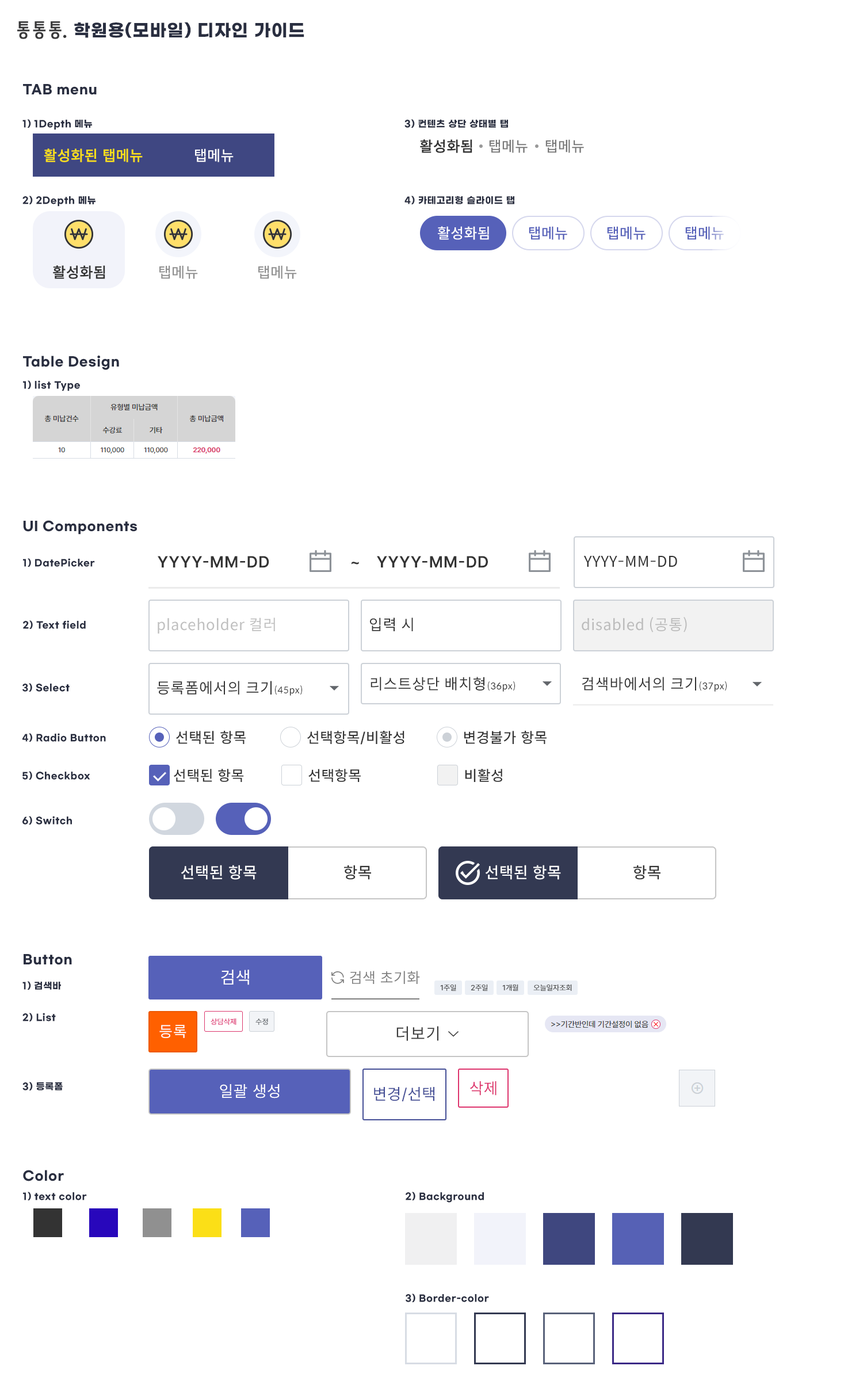
<style>
.page{position:relative;width:863px;height:1381px;background:#ffffff}
.page>*{position:absolute;margin:0}
.t1{font:17.3px "GmarketSansTTFBold";letter-spacing:0.04em;color:#292e40}
.t2{font:12.7px "GmarketSansTTFBold";letter-spacing:0.04em;color:#292e40}
.t3{font:9.2px "GmarketSansTTFBold";letter-spacing:0.04em;color:#292e40}
.t4{font:15px "Pretendard-Medium";letter-spacing:0.04em;color:#fbdf17;font-weight:bold}
.t5{font:15px "Pretendard-Medium";letter-spacing:0.04em;color:#ffffff}
.t6{font:15px "Pretendard-Medium";letter-spacing:0.04em;color:#333333;font-weight:bold}
.t7{font:15px "Pretendard-Medium";letter-spacing:0.04em;color:#7a7a7a}
.t8{font:15px "Pretendard-Medium";letter-spacing:0.04em;color:#5661b9}
.t9{font:15px "Pretendard-Medium";letter-spacing:0.04em;color:#909090}
.t10{font:16.1px "Pretendard-SemiBold";letter-spacing:0.04em;color:#333333}
.t11{font:15px "SpoqaHanSans-Regular";letter-spacing:0.04em;color:#333333}
.t12{font:15px "SpoqaHanSans-Regular";letter-spacing:0.04em;color:#c0c0c0}
.t13{font:15px "SpoqaHanSans-Regular";letter-spacing:0.04em;color:#bcbcbc}
.t14{font:9.2px "SpoqaHanSans-Regular";letter-spacing:0.04em;color:#333333}
.t15{font:15px "Pretendard-Medium";letter-spacing:0.04em;color:#333333}
.t16{font:14.8px "Pretendard-Medium";letter-spacing:0.04em;color:#333333}
.t17{font:16.1px "Pretendard-Medium";letter-spacing:0.04em;color:#ffffff}
.t18{font:16.1px "Pretendard-Medium";letter-spacing:0.04em;color:#333333}
.t19{font:17.3px "Pretendard-Regular";letter-spacing:0.04em;color:#ffffff}
.t20{font:15px "Pretendard-Regular";letter-spacing:0.04em;color:#7e7e7e}
.t21{font:15px "SpoqaHanSans-Regular";letter-spacing:0.04em;color:#ffffff}
.t22{font:16.1px "SpoqaHanSans-Regular";letter-spacing:0.04em;color:#3c3c3c}
.t23{font:16.1px "Pretendard-Regular";letter-spacing:0.04em;color:#ffffff}
.t24{font:16.1px "Pretendard-Regular";letter-spacing:0.04em;color:#dd346d}
.t25{font:16.1px "Pretendard-Regular";letter-spacing:0.04em;color:#454f96}
</style>
<div class="page">
<p class="t1" style="left:74px;top:22px;width:230px;height:16px">학원용(모바일) 디자인 가이드</p>
<p class="t2" style="left:23px;top:84px;width:74px;height:11px">TAB menu</p>
<p class="t3" style="left:22px;top:119px;width:70px;height:11px">1) 1Depth 메뉴</p>
<p class="t3" style="left:405px;top:119px;width:103px;height:9px">3) 컨텐츠 상단 상태별 탭</p>
<p class="t4" style="left:44px;top:148px;width:99px;height:14px">활성화된 탭메뉴</p>
<p class="t5" style="left:195px;top:148px;width:39px;height:14px">탭메뉴</p>
<p class="t6" style="left:420px;top:139px;width:53px;height:14px">활성화됨</p>
<p class="t7" style="left:489px;top:139px;width:39px;height:14px">탭메뉴</p>
<p class="t7" style="left:546px;top:139px;width:38px;height:14px">탭메뉴</p>
<p class="t3" style="left:22px;top:196px;width:74px;height:11px">2) 2Depth 메뉴</p>
<p class="t3" style="left:405px;top:196px;width:110px;height:8px">4) 카테고리형 슬라이드 탭</p>
<p class="t5" style="left:438px;top:226px;width:51px;height:14px">활성화됨</p>
<p class="t8" style="left:529px;top:226px;width:38px;height:14px">탭메뉴</p>
<p class="t8" style="left:607px;top:226px;width:39px;height:14px">탭메뉴</p>
<p class="t8" style="left:685px;top:226px;width:39px;height:14px">탭메뉴</p>
<p class="t6" style="left:53px;top:265px;width:52px;height:14px">활성화됨</p>
<p class="t9" style="left:159px;top:265px;width:39px;height:14px">탭메뉴</p>
<p class="t9" style="left:258px;top:265px;width:39px;height:14px">탭메뉴</p>
<p class="t2" style="left:23px;top:355px;width:96px;height:15px">Table Design</p>
<p class="t3" style="left:23px;top:380px;width:57px;height:11px">1) list Type</p>
<p class="t2" style="left:23px;top:520px;width:114px;height:15px">UI Components</p>
<p class="t10" style="left:158px;top:556px;width:111px;height:12px">YYYY-MM-DD</p>
<p class="t10" style="left:352px;top:556px;width:136px;height:12px">~   YYYY-MM-DD</p>
<p class="t11" style="left:584px;top:556px;width:93px;height:11px">YYYY-MM-DD</p>
<p class="t3" style="left:23px;top:558px;width:72px;height:9px">1) DatePicker</p>
<p class="t12" style="left:158px;top:618px;width:117px;height:16px">placeholder 컬러</p>
<p class="t11" style="left:370px;top:618px;width:43px;height:13px">입력 시</p>
<p class="t13" style="left:582px;top:617px;width:105px;height:16px">disabled (공통)</p>
<p class="t3" style="left:23px;top:620px;width:63px;height:9px">2) Text field</p>
<p class="t11" style="left:371px;top:677px;width:144px;height:15px">리스트상단 배치형<span class="t14">(36px)</span></p>
<p class="t11" style="left:582px;top:677px;width:145px;height:15px">검색바에서의 크기<span class="t14">(37px)</span></p>
<p class="t3" style="left:22px;top:683px;width:48px;height:9px">3) Select</p>
<p class="t11" style="left:157px;top:681px;width:145px;height:15px">등록폼에서의 크기<span class="t14">(45px)</span></p>
<p class="t3" style="left:22px;top:733px;width:84px;height:9px">4) Radio Button</p>
<p class="t15" style="left:176px;top:731px;width:70px;height:13px">선택된 항목</p>
<p class="t15" style="left:307px;top:731px;width:98px;height:14px">선택항목/비활성</p>
<p class="t15" style="left:464px;top:731px;width:83px;height:13px">변경불가 항목</p>
<p class="t3" style="left:22px;top:771px;width:68px;height:9px">5) Checkbox</p>
<p class="t16" style="left:174px;top:769px;width:70px;height:13px">선택된 항목</p>
<p class="t16" style="left:308px;top:769px;width:53px;height:13px">선택항목</p>
<p class="t16" style="left:465px;top:769px;width:37px;height:13px">비활성</p>
<p class="t3" style="left:22px;top:816px;width:50px;height:9px">6) Switch</p>
<p class="t17" style="left:181px;top:865px;width:76px;height:15px">선택된 항목</p>
<p class="t18" style="left:344px;top:865px;width:27px;height:15px">항목</p>
<p class="t17" style="left:485px;top:865px;width:76px;height:15px">선택된 항목</p>
<p class="t18" style="left:634px;top:865px;width:27px;height:15px">항목</p>
<p class="t2" style="left:24px;top:954px;width:48px;height:11px">Button</p>
<p class="t19" style="left:221px;top:970px;width:28px;height:15px">검색</p>
<p class="t20" style="left:350px;top:971px;width:70px;height:13px">검색 초기화</p>
<p class="t3" style="left:22px;top:981px;width:39px;height:9px">1) 검색바</p>
<p class="t3" style="left:22px;top:1013px;width:34px;height:9px">2) List</p>
<p class="t21" style="left:159px;top:1025px;width:27px;height:13px">등록</p>
<p class="t22" style="left:397px;top:1026px;width:42px;height:15px">더보기</p>
<p class="t3" style="left:22px;top:1082px;width:41px;height:9px">3) 등록폼</p>
<p class="t23" style="left:220px;top:1084px;width:60px;height:15px">일괄 생성</p>
<p class="t24" style="left:470px;top:1081px;width:27px;height:15px">삭제</p>
<p class="t25" style="left:374px;top:1087px;width:61px;height:15px">변경/선택</p>
<p class="t2" style="left:23px;top:1170px;width:41px;height:12px">Color</p>
<p class="t3" style="left:23px;top:1192px;width:64px;height:9px">1) text color</p>
<p class="t3" style="left:406px;top:1192px;width:78px;height:11px">2) Background</p>
<p class="t3" style="left:406px;top:1294px;width:83px;height:8px">3) Border-color</p>
</div>
